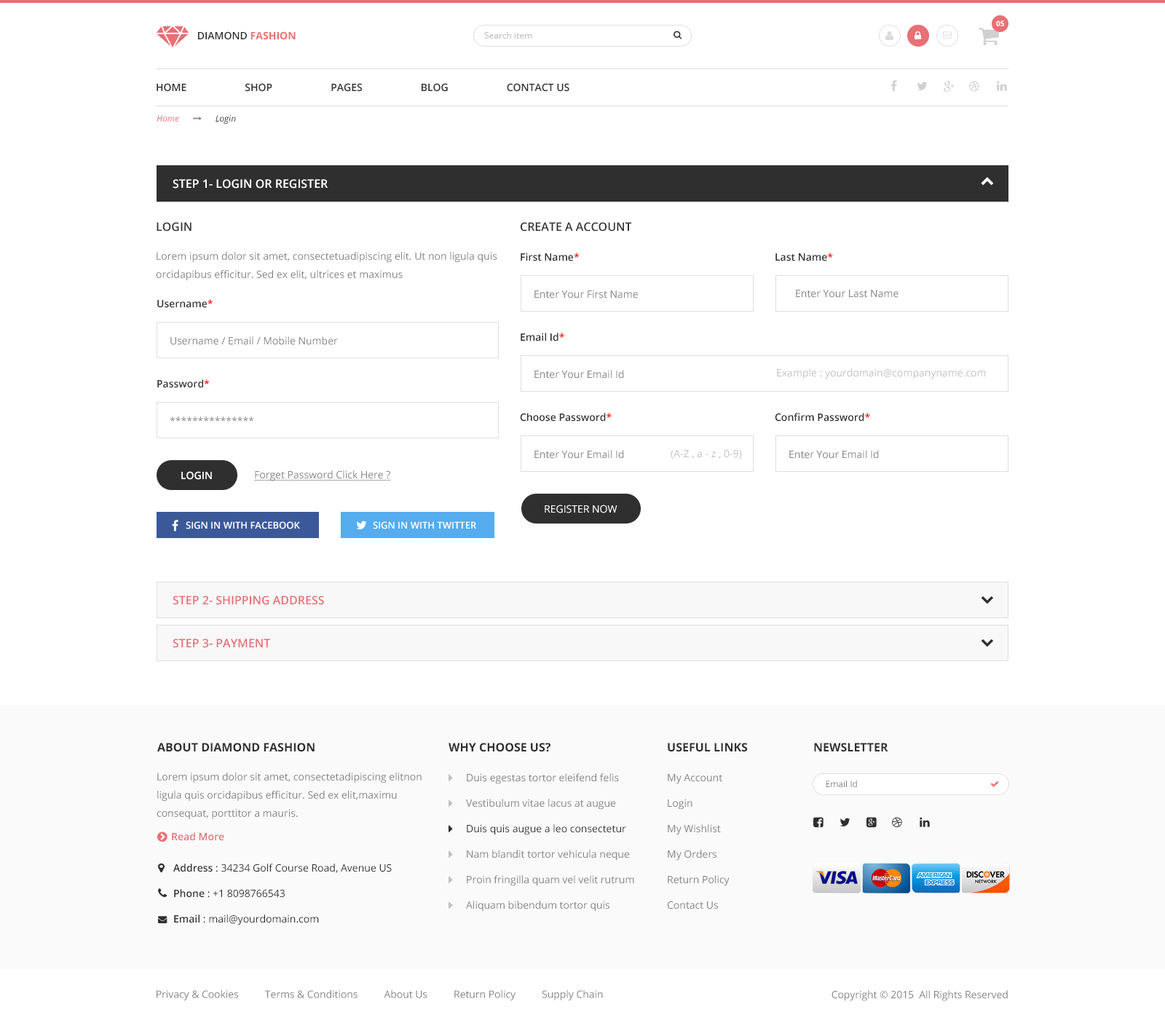
<style>
.page{position:relative;width:1165px;height:1023px;background:#ffffff}
.page>*{position:absolute;margin:0}
.t1{font:7.3px "OpenSans-Bold";color:#ffffff}
.t2{font:10.2px "OpenSans-Semibold";color:#2f2f2f;text-transform:uppercase}
.t3{font:10.2px "OpenSans-Bold";color:#e77075;text-transform:uppercase}
.t4{font:8.7px "OpenSans";color:#c2c2c2}
.t5{font:11.7px "OpenSans-Semibold";color:#ffffff;text-transform:uppercase}
.t6{font:11.7px "OpenSans-Semibold";color:#2f2f2f;text-transform:uppercase}
.t7{font:10.2px/18.2px "OpenSans";color:#848484}
.t8{font:10.2px "OpenSans-Semibold";color:#2f2f2f}
.t9{font:10.2px "OpenSans-Semibold";color:#ff0000}
.t10{font:10.2px "OpenSans";color:#848484}
.t11{font:10.2px "OpenSans";color:#c2c2c2}
.t12{font:10.2px "OpenSans-Semibold";color:#ffffff;text-transform:uppercase}
.t13{font:10.2px "OpenSans";color:#848484;text-decoration:underline}
.t14{font:10.2px "OpenSans";color:#ffffff;text-transform:uppercase}
.t15{font:9.5px "OpenSans-Semibold";color:#ffffff;text-transform:uppercase}
.t16{font:11.7px "OpenSans-Semibold";color:#e77075;text-transform:uppercase}
.t17{font:11.7px "OpenSans-Bold";color:#2f2f2f;text-transform:uppercase}
.t18{font:10.2px/25.5px "OpenSans";color:#848484}
.t19{font:10.2px/25.5px "OpenSans";color:#2f2f2f}
.t20{font:8.7px "OpenSans";color:#887f80}
.t21{font:10.2px "OpenSans-Semibold";color:#e77075}
.t22{font:10.2px/25.5px "OpenSans-Semibold";color:#2f2f2f}
</style>
<div class="page">
<p class="t1" style="left:996px;top:20px;width:8px;height:6px">05</p>
<p class="t2" style="left:198px;top:31px;width:98px;height:9px">Diamond <span class="t3">fashion</span></p>
<p class="t4" style="left:484px;top:32px;width:48px;height:7px">Search item</p>
<p class="t2" style="left:157px;top:83px;width:413px;height:9px">Home                      Shop                      pages                      blog                      contact us</p>
<p class="t5" style="left:173px;top:179px;width:155px;height:10px">Step 1- Login or register</p>
<p class="t6" style="left:157px;top:222px;width:35px;height:10px">Login</p>
<p class="t6" style="left:521px;top:222px;width:111px;height:10px">Create a account</p>
<p class="t7" style="left:156px;top:252px;width:341px;height:28px">Lorem ipsum dolor sit amet, consectetuadipiscing elit. Ut non ligula quis orcidapibus efficitur. Sed ex elit, ultrices et maximus</p>
<p class="t8" style="left:521px;top:253px;width:59px;height:8px">First Name<span class="t9">*</span></p>
<p class="t8" style="left:776px;top:253px;width:57px;height:8px">Last Name<span class="t9">*</span></p>
<p class="t10" style="left:535px;top:290px;width:103px;height:9px">Enter Your First Name</p>
<p class="t10" style="left:796px;top:290px;width:103px;height:8px">Enter Your Last Name</p>
<p class="t8" style="left:157px;top:299px;width:56px;height:9px">Username<span class="t9">*</span></p>
<p class="t10" style="left:170px;top:336px;width:168px;height:9px">Username / Email / Mobile Number</p>
<p class="t8" style="left:521px;top:333px;width:43px;height:9px">Email Id<span class="t9">*</span></p>
<p class="t10" style="left:535px;top:370px;width:89px;height:9px">Enter Your Email Id</p>
<p class="t11" style="left:777px;top:369px;width:209px;height:10px">Example : yourdomain@companyname.com</p>
<p class="t8" style="left:157px;top:379px;width:53px;height:9px">Password<span class="t9">*</span></p>
<p class="t8" style="left:520px;top:413px;width:92px;height:9px">Choose Password<span class="t9">*</span></p>
<p class="t8" style="left:775px;top:413px;width:95px;height:9px">Confirm Password<span class="t9">*</span></p>
<p class="t10" style="left:170px;top:417px;width:84px;height:5px">***************</p>
<p class="t11" style="left:671px;top:449px;width:71px;height:11px">(A-Z , a - z , 0-9)</p>
<p class="t10" style="left:535px;top:450px;width:89px;height:9px">Enter Your Email Id</p>
<p class="t10" style="left:789px;top:450px;width:90px;height:9px">Enter Your Email Id</p>
<p class="t12" style="left:181px;top:471px;width:31px;height:9px">Login</p>
<p class="t13" style="left:254px;top:470px;width:137px;height:11px">Forget Password Click Here ?</p>
<p class="t14" style="left:545px;top:505px;width:73px;height:8px">register now</p>
<p class="t15" style="left:186px;top:521px;width:114px;height:8px">Sign in with facebook</p>
<p class="t15" style="left:373px;top:521px;width:103px;height:8px">Sign in with Twitter</p>
<p class="t16" style="left:173px;top:596px;width:151px;height:9px">Step 2- Shipping address</p>
<p class="t16" style="left:173px;top:639px;width:97px;height:9px">Step 3- payment</p>
<p class="t17" style="left:157px;top:743px;width:158px;height:9px">About diamond Fashion</p>
<p class="t17" style="left:449px;top:743px;width:102px;height:9px">why choose us?</p>
<p class="t17" style="left:668px;top:743px;width:80px;height:9px">useful links</p>
<p class="t17" style="left:814px;top:743px;width:75px;height:9px">newsletter</p>
<p class="t7" style="left:157px;top:773px;width:265px;height:46px">Lorem ipsum dolor sit amet, consectetadipiscing elitnon ligula quis orcidapibus efficitur. Sed ex elit,maximu<br>consequat, porttitor a mauris.</p>
<p class="t18" style="left:466px;top:773px;width:168px;height:139px">Duis egestas tortor eleifend felis <br>Vestibulum vitae lacus at augue <br><span class="t19">Duis quis augue a leo consectetur <br></span>Nam blandit tortor vehicula neque<br>Proin fringilla quam vel velit rutrum<br>Aliquam bibendum tortor quis</p>
<p class="t18" style="left:667px;top:774px;width:63px;height:136px">My Account<br>Login<br>My Wishlist<br>My Orders<br>Return Policy<br>Contact Us</p>
<p class="t20" style="left:826px;top:781px;width:31px;height:6px">Email Id</p>
<p class="t21" style="left:172px;top:832px;width:52px;height:9px">Read More</p>
<p class="t19" style="left:173px;top:864px;width:219px;height:62px"><span class="t22">Address</span> : 34234 Golf Course Road, Avenue US<br><span class="t22">Phone</span> : +1 8098766543<br><span class="t22">Email</span> : mail@yourdomain.com</p>
<p class="t10" style="left:157px;top:990px;width:446px;height:11px">Privacy &amp; Cookies          Terms &amp; Conditions          About Us          Return Policy          Supply Chain</p>
<p class="t10" style="left:832px;top:991px;width:176px;height:10px">Copyright © 2015  All Rights Reserved</p>
</div>
